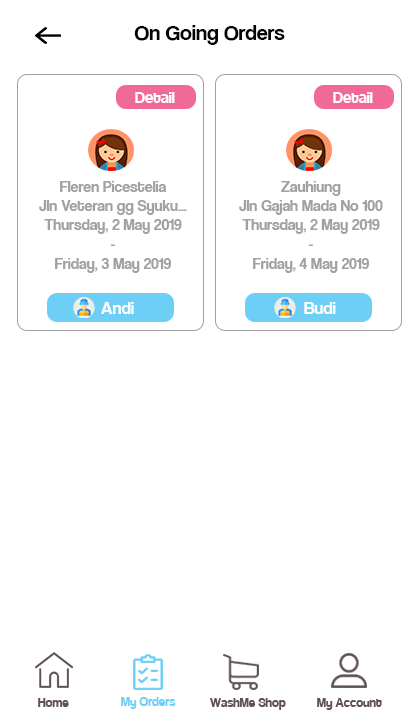
<style>
.page{position:relative;width:420px;height:720px;background:#ffffff}
.page>*{position:absolute;margin:0}
.t1{font:22px "CoolveticaRg-Regular";color:#040404}
.t2{font:18px "Coolvetica-Regular";color:#ffffff}
.t3{font:16px "CoolveticaRg-Regular";color:#a1a1a1}
.t4{font:18px "CoolveticaRg-Regular";color:#fffefe}
.t5{font:14px "Coolvetica-Regular";color:#605252}
.t6{font:14px "Coolvetica-Regular";color:#6dcff6}
</style>
<div class="page">
<p class="t1" style="left:134px;top:25px;width:151px;height:20px">On Going Orders</p>
<p class="t2" style="left:135px;top:92px;width:40px;height:11px">Detail</p>
<p class="t2" style="left:333px;top:92px;width:40px;height:11px">Detail</p>
<p class="t3" style="left:39px;top:181px;width:148px;height:92px;text-align:center">Fleren Picestelia<br>Jln Veteran gg Syuku...<br>Thursday, 2 May 2019<br>-<br>Friday, 3 May 2019</p>
<p class="t3" style="left:239px;top:181px;width:144px;height:92px;text-align:center">Zauhiung<br>Jln Gajah Mada No 100<br>Thursday, 2 May 2019<br>-<br>Friday, 4 May 2019</p>
<p class="t4" style="left:101px;top:302px;width:33px;height:12px">Andi</p>
<p class="t4" style="left:304px;top:302px;width:32px;height:12px">Budi</p>
<p class="t5" style="left:38px;top:698px;width:31px;height:9px">Home</p>
<p class="t6" style="left:121px;top:697px;width:55px;height:12px">My Orders</p>
<p class="t5" style="left:210px;top:698px;width:76px;height:12px">WashMe Shop</p>
<p class="t5" style="left:317px;top:698px;width:65px;height:12px">My Account</p>
</div>
